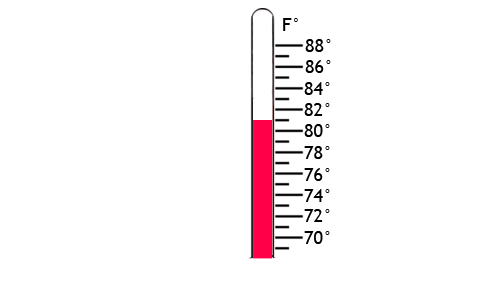
<style>
.page{position:relative;width:500px;height:300px;background:#ffffff}
.page>*{position:absolute;margin:0}
.t1{font:18px "TrebuchetMS";color:#000000}
</style>
<div class="page">
<p class="t1" style="left:283px;top:18px;width:15px;height:13px">F°</p>
<p class="t1" style="left:305px;top:39px;width:26px;height:13px">88°</p>
<p class="t1" style="left:305px;top:60px;width:26px;height:13px">86°</p>
<p class="t1" style="left:304px;top:82px;width:26px;height:13px">84°</p>
<p class="t1" style="left:304px;top:103px;width:26px;height:13px">82°</p>
<p class="t1" style="left:304px;top:124px;width:26px;height:13px">80°</p>
<p class="t1" style="left:304px;top:146px;width:26px;height:13px">78°</p>
<p class="t1" style="left:304px;top:168px;width:26px;height:13px">76°</p>
<p class="t1" style="left:304px;top:189px;width:26px;height:13px">74°</p>
<p class="t1" style="left:304px;top:209px;width:26px;height:13px">72°</p>
<p class="t1" style="left:304px;top:231px;width:26px;height:13px">70°</p>
</div>
